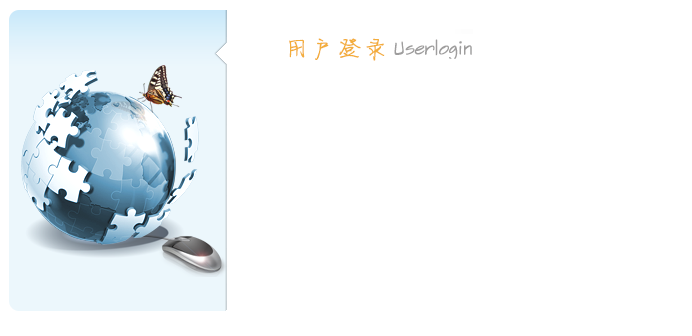
<style>
.page{position:relative;width:692px;height:336px;background:#ffffff}
.page>*{position:absolute;margin:0}
.t1{font:27px "FZJLJW--GB1-0";letter-spacing:-0.05em;color:#f3ad3b;font-weight:bold}
.t2{font:18px "SketchFlowPrint";letter-spacing:-0.05em;color:#9e9d9d;font-weight:bold}
</style>
<div class="page">
<p class="t1" style="left:289px;top:38px;width:96px;height:23px">用户登录</p>
<p class="t2" style="left:394px;top:39px;width:78px;height:20px">Userlogin</p>
</div>
